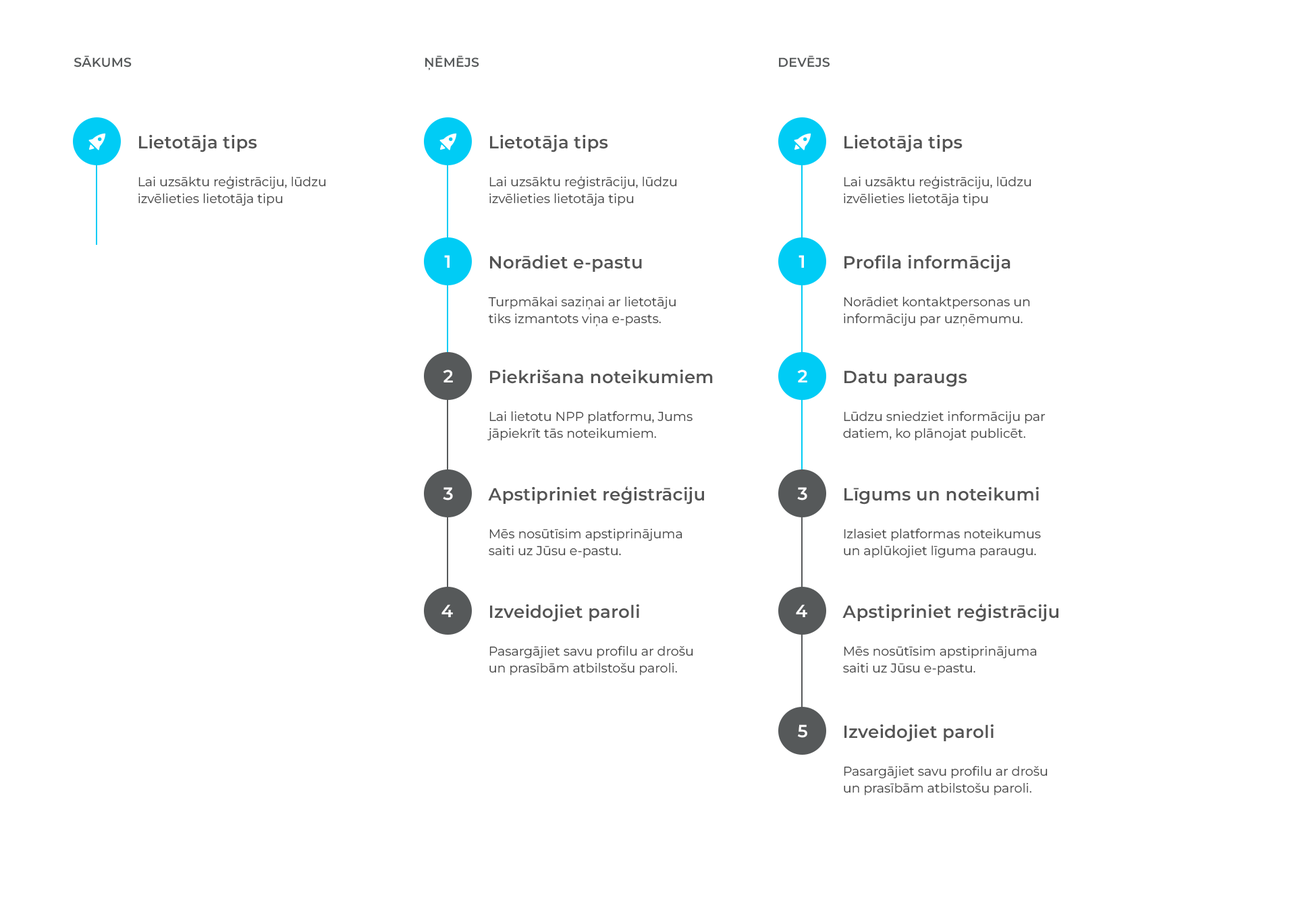
<style>
.page{position:relative;width:1296px;height:920px;background:#ffffff}
.page>*{position:absolute;margin:0}
.t1{font:12.8px "Montserrat-SemiBold";letter-spacing:0.01em;color:#56595a}
.t2{font:12.8px/16.9px "Montserrat-Regular";color:#424242}
.t3{font:17.5px "Montserrat-SemiBold";letter-spacing:0.01em;color:#545454}
.t4{font:17.5px "Montserrat-SemiBold";letter-spacing:0.01em;color:#ffffff}
</style>
<div class="page">
<p class="t1" style="left:74px;top:55px;width:58px;height:12px">SĀKUMS</p>
<p class="t1" style="left:425px;top:55px;width:54px;height:15px">ŅĒMĒJS</p>
<p class="t1" style="left:779px;top:55px;width:50px;height:12px">DEVĒJS</p>
<p class="t2" style="left:138px;top:135px;width:188px;height:71px"><span class="t3">Lietotāja tips<br><br></span>Lai uzsāktu reģistrāciju, lūdzu<br>izvēlieties lietotāja tipu</p>
<p class="t2" style="left:489px;top:135px;width:188px;height:71px"><span class="t3">Lietotāja tips<br><br></span>Lai uzsāktu reģistrāciju, lūdzu<br>izvēlieties lietotāja tipu</p>
<p class="t2" style="left:843px;top:135px;width:188px;height:71px"><span class="t3">Lietotāja tips<br><br></span>Lai uzsāktu reģistrāciju, lūdzu<br>izvēlieties lietotāja tipu</p>
<p class="t4" style="left:444px;top:255px;width:5px;height:13px">1</p>
<p class="t2" style="left:488px;top:255px;width:187px;height:72px"><span class="t3">Norādiet e-pastu<br><br></span>Turpmākai saziņai ar lietotāju<br>tiks izmantots viņa e-pasts.</p>
<p class="t4" style="left:798px;top:255px;width:6px;height:13px">1</p>
<p class="t2" style="left:843px;top:255px;width:187px;height:72px"><span class="t3">Profila informācija<br><br></span>Norādiet kontaktpersonas un<br>informāciju par uzņēmumu.</p>
<p class="t4" style="left:443px;top:370px;width:10px;height:13px">2</p>
<p class="t2" style="left:487px;top:370px;width:226px;height:71px"><span class="t3">Piekrišana noteikumiem<br><br></span>Lai lietotu NPP platformu, Jums<br>jāpiekrīt tās noteikumiem.</p>
<p class="t4" style="left:797px;top:370px;width:10px;height:13px">2</p>
<p class="t2" style="left:843px;top:370px;width:202px;height:71px"><span class="t3">Datu paraugs<br><br></span>Lūdzu sniedziet informāciju par<br>datiem, ko plānojat publicēt.</p>
<p class="t4" style="left:443px;top:487px;width:10px;height:14px">3</p>
<p class="t2" style="left:488px;top:487px;width:216px;height:71px"><span class="t3">Apstipriniet reģistrāciju<br><br></span>Mēs nosūtīsim apstiprinājuma<br>saiti uz Jūsu e-pastu.</p>
<p class="t4" style="left:797px;top:487px;width:10px;height:14px">3</p>
<p class="t2" style="left:843px;top:487px;width:198px;height:71px"><span class="t3">Līgums un noteikumi<br><br></span>Izlasiet platformas noteikumus<br>un aplūkojiet līguma paraugu.</p>
<p class="t4" style="left:441px;top:605px;width:12px;height:12px">4</p>
<p class="t2" style="left:489px;top:605px;width:204px;height:70px"><span class="t3">Izveidojiet paroli<br><br></span>Pasargājiet savu profilu ar drošu<br>un prasībām atbilstošu paroli.</p>
<p class="t4" style="left:796px;top:605px;width:11px;height:12px">4</p>
<p class="t2" style="left:842px;top:604px;width:216px;height:71px"><span class="t3">Apstipriniet reģistrāciju<br><br></span>Mēs nosūtīsim apstiprinājuma<br>saiti uz Jūsu e-pastu.</p>
<p class="t4" style="left:797px;top:725px;width:10px;height:13px">5</p>
<p class="t2" style="left:843px;top:725px;width:204px;height:71px"><span class="t3">Izveidojiet paroli<br><br></span>Pasargājiet savu profilu ar drošu<br>un prasībām atbilstošu paroli.</p>
</div>
